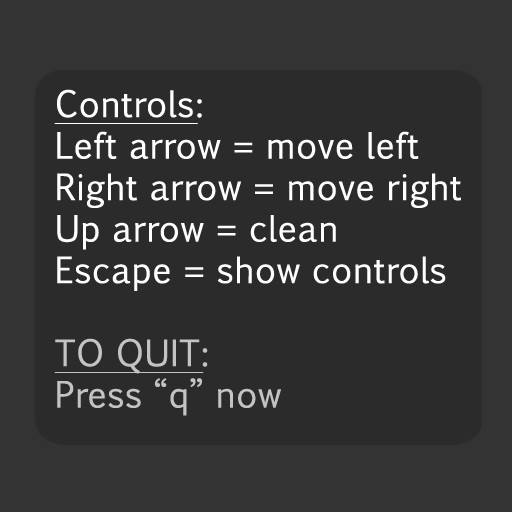
<style>
.page{position:relative;width:512px;height:512px;background:#2b2b2b}
.page>*{position:absolute;margin:0}
.t1{font:34.6px "EuphemiaCAS";color:#ffffff;font-weight:bold}
.t2{font:34.6px "EuphemiaCAS";color:#ffffff;font-weight:bold;text-decoration:underline}
.t3{font:34.6px "EuphemiaCAS";color:#c3c3c3;font-weight:bold;text-decoration:underline}
.t4{font:34.6px "EuphemiaCAS";color:#c3c3c3;font-weight:bold}
</style>
<div class="page">
<p class="t1" style="left:54px;top:89px;width:407px;height:327px"><span class="t2">Controls:<br></span>Left arrow = move left<br>Right arrow = move right<br>Up arrow = clean<br>Escape = show controls<br><br><span class="t3">TO QUIT:<br></span><span class="t4">Press “q” now</span></p>
</div>
